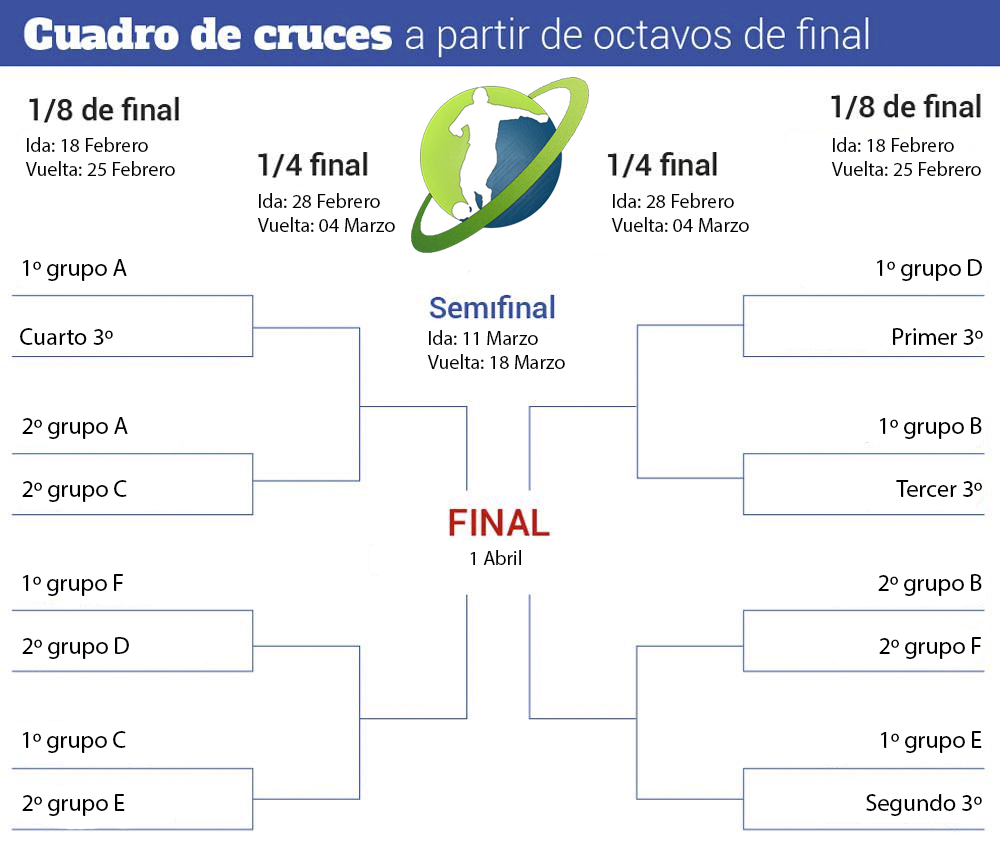
<style>
.page{position:relative;width:1000px;height:856px;background:#ffffff}
.page>*{position:absolute;margin:0}
.t1{font:20px "MyriadPro-Regular";color:#000000}
.t2{font:24px "MyriadPro-Regular";color:#000000}
</style>
<div class="page">
<p class="t1" style="left:25px;top:137px;width:150px;height:39px">Ida: 18 Febrero<br>Vuelta: 25 Febrero</p>
<p class="t1" style="left:831px;top:137px;width:150px;height:39px">Ida: 18 Febrero<br>Vuelta: 25 Febrero</p>
<p class="t1" style="left:257px;top:193px;width:138px;height:39px">Ida: 28 Febrero<br>Vuelta: 04 Marzo</p>
<p class="t1" style="left:611px;top:193px;width:138px;height:39px">Ida: 28 Febrero<br>Vuelta: 04 Marzo</p>
<p class="t2" style="left:23px;top:259px;width:104px;height:22px">1º grupo A</p>
<p class="t2" style="left:877px;top:259px;width:105px;height:22px">1º grupo D</p>
<p class="t2" style="left:20px;top:328px;width:93px;height:17px">Cuarto 3º</p>
<p class="t2" style="left:893px;top:328px;width:90px;height:17px">Primer 3º</p>
<p class="t1" style="left:427px;top:330px;width:138px;height:39px">Ida: 11 Marzo<br>Vuelta: 18 Marzo</p>
<p class="t2" style="left:22px;top:417px;width:106px;height:22px">2º grupo A</p>
<p class="t2" style="left:880px;top:417px;width:102px;height:22px">1º grupo B</p>
<p class="t2" style="left:22px;top:480px;width:105px;height:22px">2º grupo C</p>
<p class="t2" style="left:896px;top:480px;width:86px;height:17px">Tercer 3º</p>
<p class="t1" style="left:470px;top:550px;width:51px;height:15px">1 Abril</p>
<p class="t2" style="left:23px;top:574px;width:100px;height:22px">1º grupo F</p>
<p class="t2" style="left:878px;top:574px;width:104px;height:22px">2º grupo B</p>
<p class="t2" style="left:22px;top:637px;width:107px;height:22px">2º grupo D</p>
<p class="t2" style="left:879px;top:637px;width:102px;height:22px">2º grupo F</p>
<p class="t2" style="left:23px;top:731px;width:103px;height:22px">1º grupo C</p>
<p class="t2" style="left:881px;top:731px;width:101px;height:22px">1º grupo E</p>
<p class="t2" style="left:22px;top:794px;width:103px;height:22px">2º grupo E</p>
<p class="t2" style="left:866px;top:794px;width:116px;height:22px">Segundo 3º</p>
</div>
